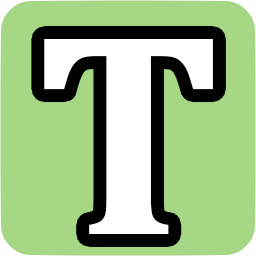
<style>
.page{position:relative;width:256px;height:256px;background:#a6d785}
.page>*{position:absolute;margin:0}
.t1{font:293.3px "Cambria-Bold";color:#ffffff}
</style>
<div class="page">
<p class="t1" style="left:44px;top:39px;width:169px;height:195px">T</p>
</div>
